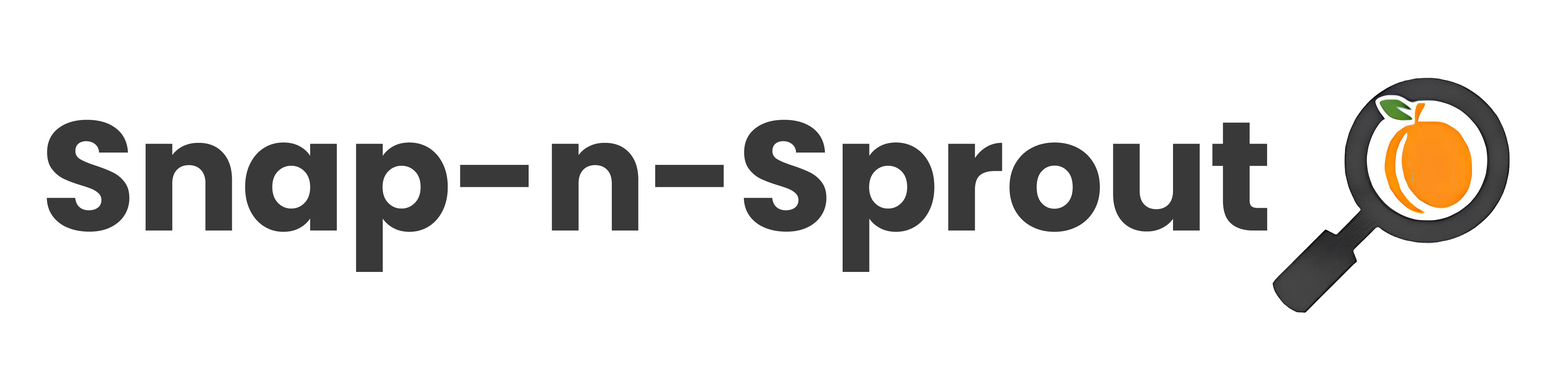
<style>
.page{position:relative;width:1568px;height:373px;background:#ffffff}
.page>*{position:absolute;margin:0}
.t1{font:155.6px "Poppins-Bold";color:#393939}
</style>
<div class="page">
<p class="t1" style="left:47px;top:120px;width:1220px;height:152px">Snap-n-Sprout</p>
</div>
